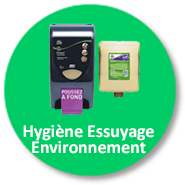
<style>
.page{position:relative;width:185px;height:185px;background:#00cc66}
.page>*{position:absolute;margin:0}
.t1{font:18px/16px "Calibri-Bold";color:#ffffff}
</style>
<div class="page">
<p class="t1" style="left:23px;top:124px;width:131px;height:30px;text-align:center">Hygiène Essuyage <br>Environnement</p>
</div>
